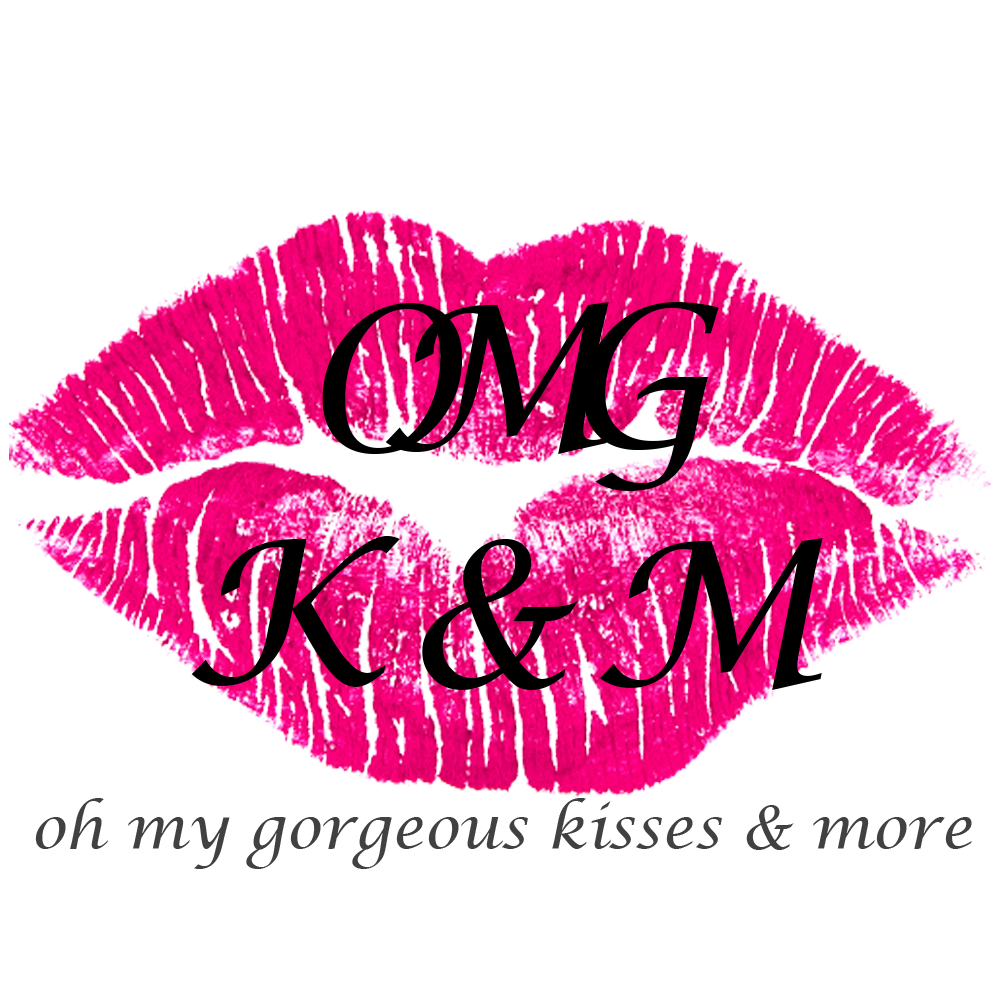
<style>
.page{position:relative;width:1000px;height:1000px;background:#ffffff}
.page>*{position:absolute;margin:0}
.t1{font:200px "LucidaCalligraphy-Italic";color:#010001}
.t2{font:200px "LucidaCalligraphy-Italic";color:#000000}
.t3{font:60px "LucidaCalligraphy-Italic";color:#424142}
</style>
<div class="page">
<p class="t1" style="left:322px;top:303px;width:140px;height:151px">O</p>
<p class="t2" style="left:385px;top:302px;width:224px;height:152px">M</p>
<p class="t2" style="left:583px;top:302px;width:136px;height:189px">G</p>
<p class="t2" style="left:191px;top:536px;width:209px;height:151px">K</p>
<p class="t2" style="left:422px;top:539px;width:157px;height:151px">&amp;</p>
<p class="t2" style="left:599px;top:538px;width:224px;height:152px">M</p>
<p class="t3" style="left:35px;top:798px;width:937px;height:71px">oh my gorgeous kisses &amp; more</p>
</div>
